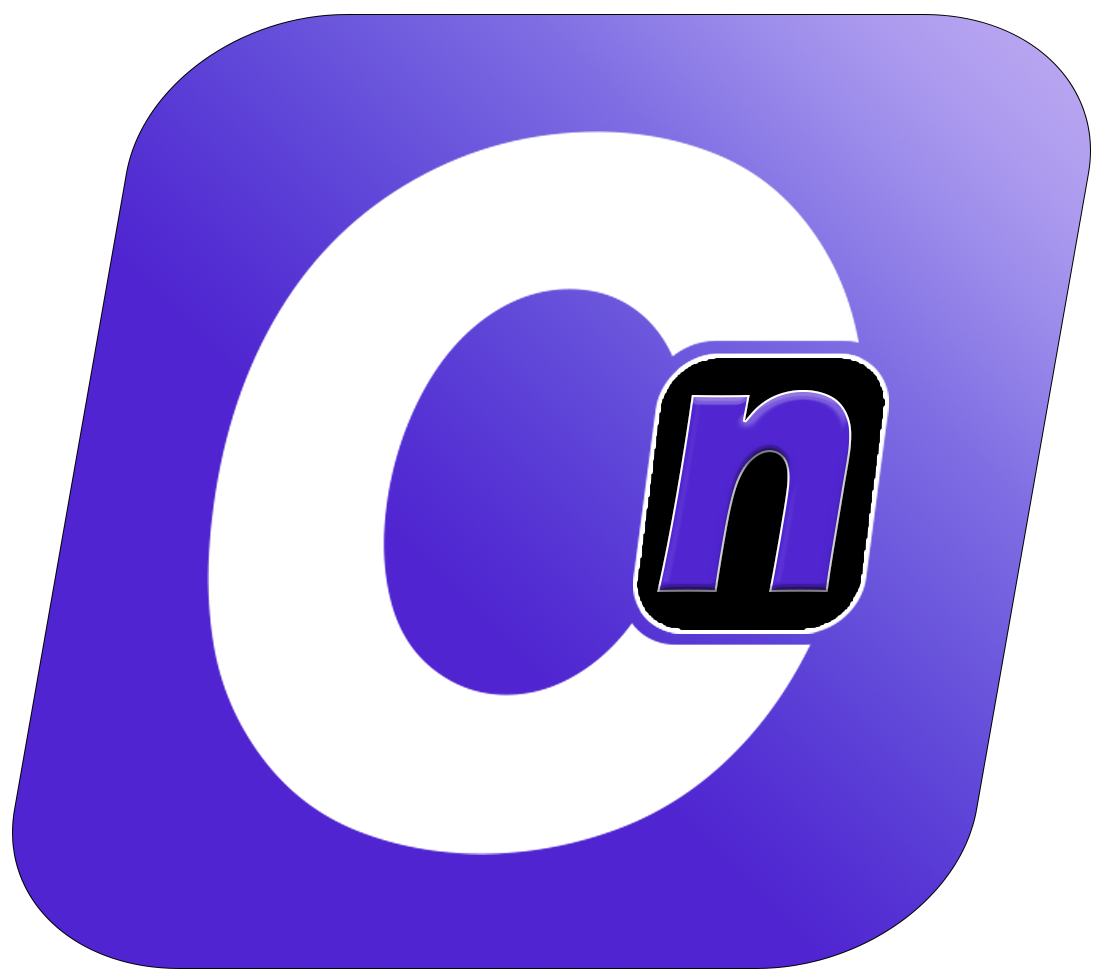
<style>
.page{position:relative;width:1104px;height:980px;background:#ffffff}
.page>*{position:absolute;margin:0}
.t1{font:395.9px "ErasITC-Bold";color:#5025d1;font-style:italic;scale:0.74 1}
</style>
<div class="page">
<p class="t1" style="left:657px;top:390px;width:195px;height:202px">n</p>
</div>
